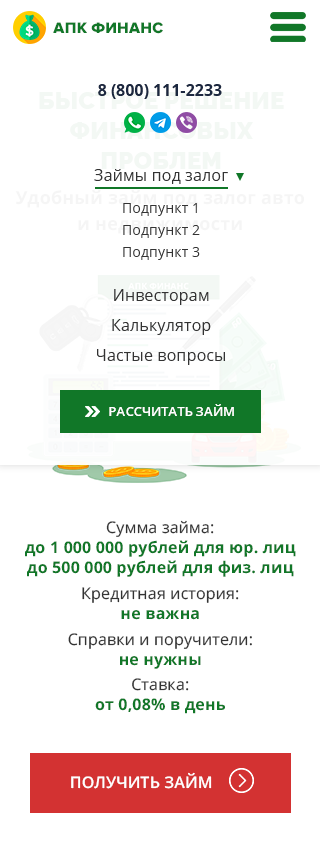
<style>
.page{position:relative;width:320px;height:848px;background:#ffffff}
.page>*{position:absolute;margin:0}
.t1{font:15.8px "ProximaNova-Extrabld";letter-spacing:0.01em;color:#117728;text-transform:uppercase}
.t2{font:16px "OpenSans-Bold";letter-spacing:0.01em;color:#1c2840}
.t3{font:16px/30px "OpenSans-Regular";letter-spacing:0.01em;color:#333333}
.t4{font:14px/22px "OpenSans-Regular";letter-spacing:0.01em;color:#333333}
.t5{font:13px "OpenSans-SemiBold";letter-spacing:0.01em;color:#ffffff;text-transform:uppercase}
.t6{font:16px/20px "OpenSans-Bold";letter-spacing:0.01em;color:#117728}
.t7{font:16px/20px "OpenSans-Regular";letter-spacing:0.01em;color:#333333}
.t8{font:16px/26px "OpenSans-Regular";letter-spacing:0.01em;color:#333333}
.t9{font:16px/25px "OpenSans-Regular";letter-spacing:0.01em;color:#333333}
.t10{font:16px "OpenSans-SemiBold";letter-spacing:0.01em;color:#ffffff;text-transform:uppercase}
</style>
<div class="page">
<p class="t1" style="left:53px;top:22px;width:110px;height:12px">АПК Финанс</p>
<p class="t2" style="left:98px;top:84px;width:124px;height:15px">8 (800) 111-2233</p>
<p class="t3" style="left:94px;top:169px;width:134px;height:196px;text-align:center">Займы под залог<br><br><br> <br>Инвесторам<br>Калькулятор<br>Частые вопросы</p>
<p class="t4" style="left:123px;top:203px;width:77px;height:57px;text-align:center">Подпункт 1<br>Подпункт 2<br>Подпункт 3</p>
<p class="t5" style="left:109px;top:404px;width:125px;height:12px">Рассчитать займ</p>
<p class="t6" style="left:25px;top:520px;width:271px;height:194px;text-align:center"><span class="t7">Сумма займа:<br></span>до 1 000 000 рублей для юр. лиц<br>до 500 000 рублей для физ. лиц<br><span class="t8">Кредитна</span><span class="t7">я история:<br></span>не важна<br><span class="t8">Справки и п</span><span class="t7">оручители:<br></span>не нужны<br><span class="t9">Ста</span><span class="t7">вка:<br></span>от 0,08% в день</p>
<p class="t10" style="left:71px;top:772px;width:141px;height:17px">Получить займ</p>
</div>
